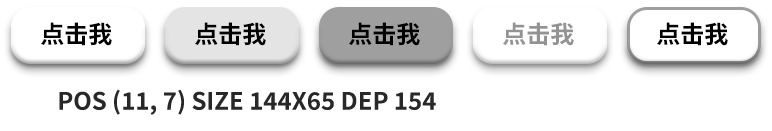
<style>
.page{position:relative;width:772px;height:131px;background:#ffffff}
.page>*{position:absolute;margin:0}
.t1{font:24px "NotoSansSC-Bold";color:#000000;text-transform:uppercase;font-weight:bold}
.t2{font:24px "NotoSansSC-Bold";color:#939393;text-transform:uppercase;font-weight:bold}
.t3{font:24px "NotoSansSC-Bold";color:#282828;text-transform:uppercase;font-weight:bold}
</style>
<div class="page">
<p class="t1" style="left:41px;top:22px;width:71px;height:24px">点击我</p>
<p class="t1" style="left:195px;top:22px;width:71px;height:24px">点击我</p>
<p class="t1" style="left:349px;top:22px;width:71px;height:24px">点击我</p>
<p class="t2" style="left:503px;top:22px;width:71px;height:24px">点击我</p>
<p class="t1" style="left:657px;top:22px;width:71px;height:24px">点击我</p>
<p class="t3" style="left:59px;top:89px;width:377px;height:26px">Pos (11, 7) Size 144x65 DEP 154</p>
</div>
